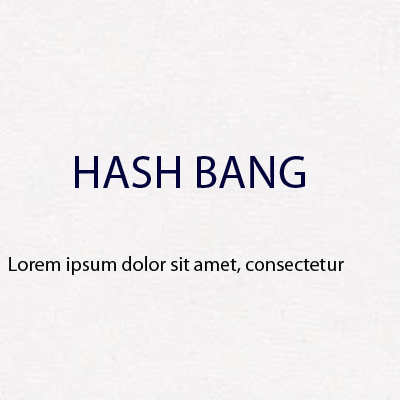
<style>
.page{position:relative;width:400px;height:400px;background:#f5f3f4}
.page>*{position:absolute;margin:0}
.t1{font:46.5px "MyriadPro-Regular";color:#f3f2f0}
.t2{font:46.5px "MyriadPro-Regular";color:#03033b}
.t3{font:20px "MyriadPro-Regular";color:#060606}
</style>
<div class="page">
<p class="t1" style="left:75px;top:114px;width:220px;height:32px">HASHBANG</p>
<p class="t2" style="left:75px;top:156px;width:230px;height:32px">HASH BANG</p>
<p class="t3" style="left:9px;top:256px;width:335px;height:19px">Lorem ipsum dolor sit amet, consectetur</p>
</div>
